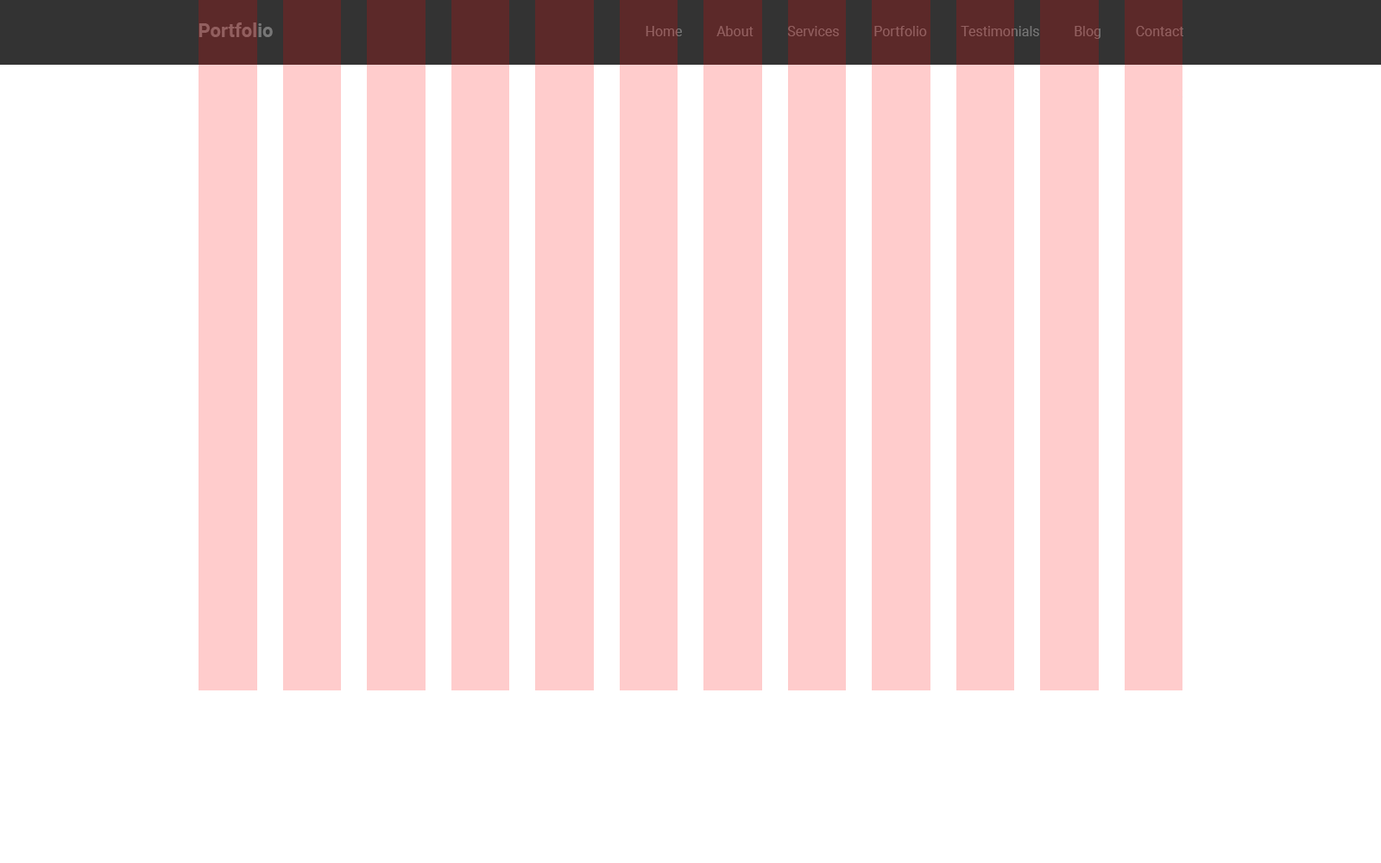
<style>
.page{position:relative;width:1381px;height:863px;background:#ffffff}
.page>*{position:absolute;margin:0}
.t1{font:19px "Roboto-Bold";color:#925f5f}
.t2{font:13.8px "Roboto-Regular";color:#925f5f}
</style>
<div class="page">
<p class="t1" style="left:199px;top:22px;width:74px;height:15px">Portfolio</p>
<p class="t2" style="left:646px;top:26px;width:538px;height:13px">Home          About          Services          Portfolio          Testimonials          Blog          Contact</p>
</div>
